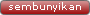
<style>
.page{position:relative;width:90px;height:15px}
.page>*{position:absolute;margin:0}
.t1{font:10px "Verdana";color:#ffffff}
</style>
<div class="page">
<p class="t1" style="left:9px;top:2px;width:72px;height:10px">sembunyikan</p>
</div>
